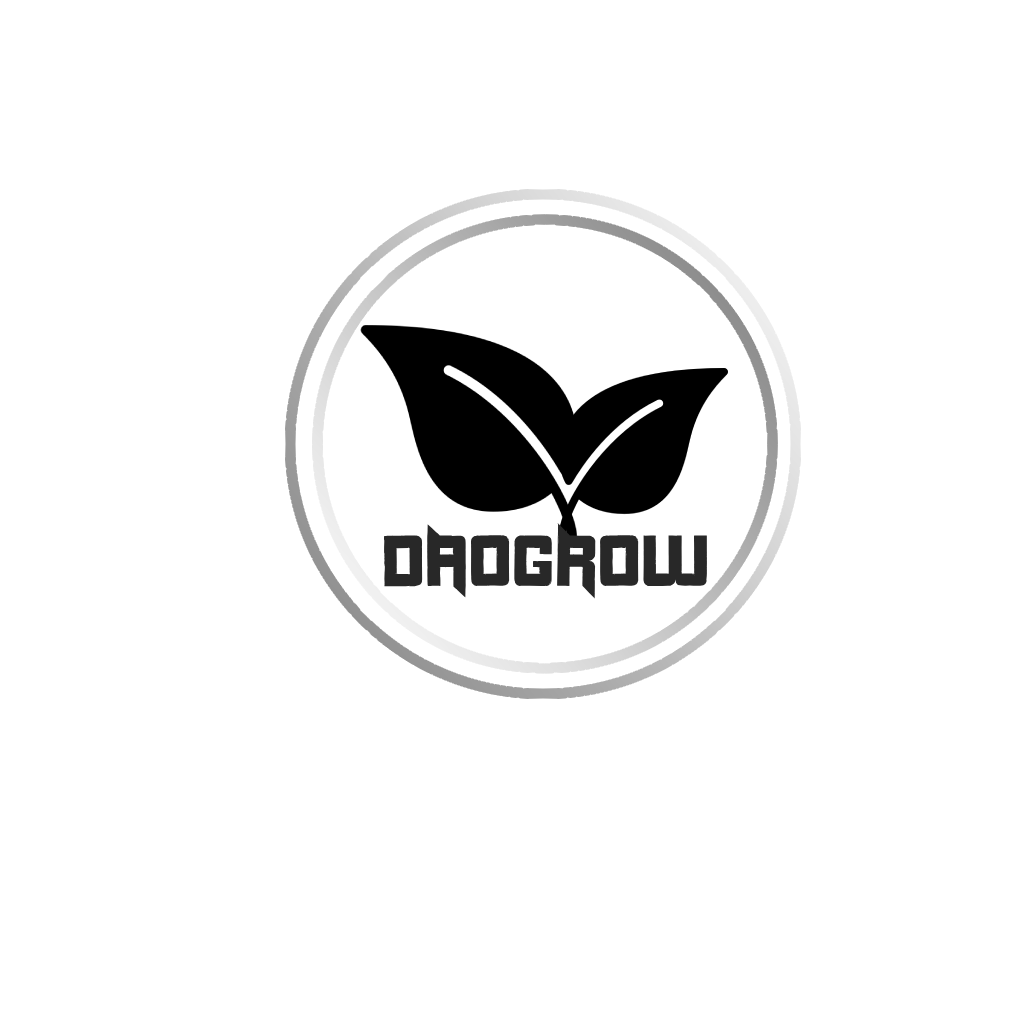
<style>
.page{position:relative;width:1024px;height:1024px;background:#ffffff}
.page>*{position:absolute;margin:0}
.t1{font:72px "Duplexide";color:#282828}
</style>
<div class="page">
<p class="t1" style="left:383px;top:523px;width:324px;height:76px">DAOGROW</p>
</div>
